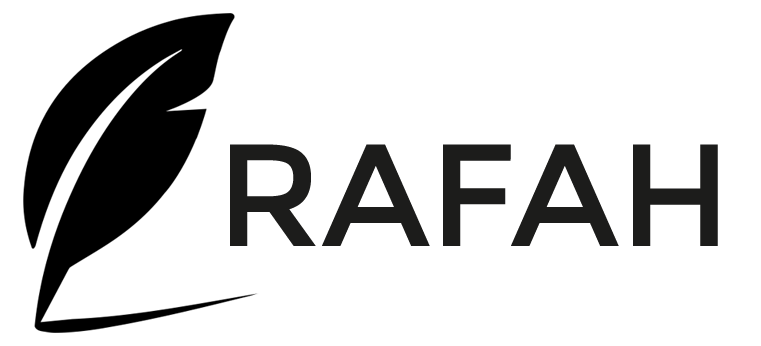
<style>
.page{position:relative;width:761px;height:346px;background:#ffffff}
.page>*{position:absolute;margin:0}
.t1{font:145.4px "Montserrat-Regular";color:#1c1c1b}
</style>
<div class="page">
<p class="t1" style="left:230px;top:144px;width:488px;height:102px">RAFAH</p>
</div>
